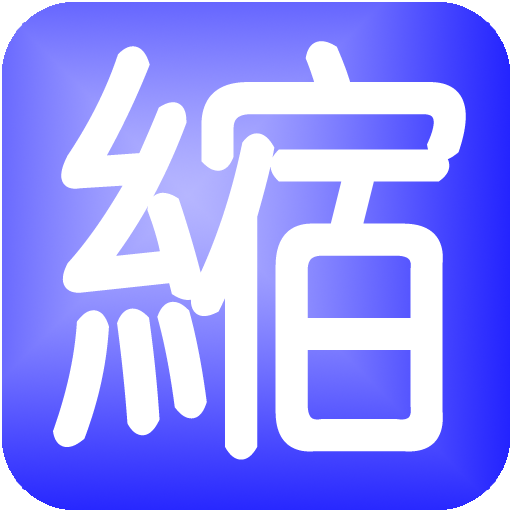
<style>
.page{position:relative;width:512px;height:512px;background:#ffffff}
.page>*{position:absolute;margin:0}
.t1{font:431.4px "YouYuan";letter-spacing:0.05em;color:#ffffff;font-weight:bold}
</style>
<div class="page">
<p class="t1" style="left:53px;top:41px;width:413px;height:419px">縮</p>
</div>
